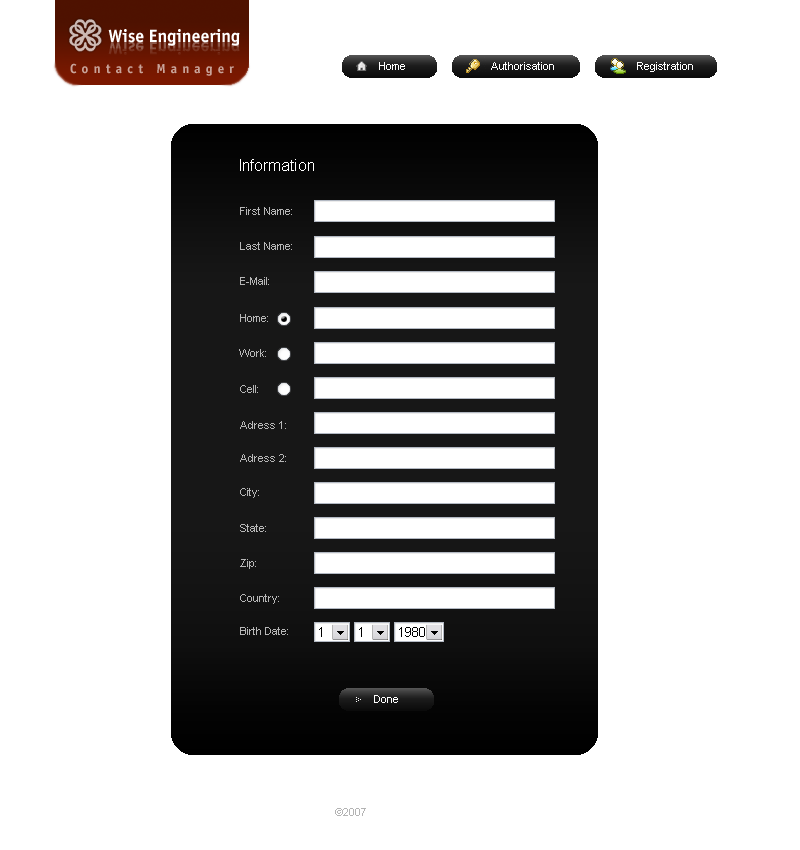
<style>
.page{position:relative;width:800px;height:850px;background:#ffffff}
.page>*{position:absolute;margin:0}
.t1{font:11px "ArialMT";color:#ffffff}
.t2{font:16px "ArialMT";color:#ffffff}
.t3{font:11px "ArialMT";color:#b7b7b7}
.t4{font:11px "ArialMT";color:#b3b3b3}
</style>
<div class="page">
<p class="t1" style="left:379px;top:62px;width:26px;height:8px">Home</p>
<p class="t1" style="left:491px;top:62px;width:63px;height:8px">Authorisation</p>
<p class="t1" style="left:637px;top:62px;width:56px;height:10px">Registration</p>
<p class="t2" style="left:240px;top:159px;width:74px;height:12px">Information</p>
<p class="t3" style="left:240px;top:207px;width:52px;height:8px">First Name:</p>
<p class="t3" style="left:240px;top:242px;width:52px;height:8px">Last Name:</p>
<p class="t3" style="left:240px;top:277px;width:29px;height:8px">E-Mail:</p>
<p class="t3" style="left:240px;top:314px;width:28px;height:8px">Home:</p>
<p class="t3" style="left:239px;top:349px;width:27px;height:8px">Work:</p>
<p class="t3" style="left:240px;top:385px;width:18px;height:8px">Cell:</p>
<p class="t3" style="left:240px;top:421px;width:46px;height:8px">Adress 1:</p>
<p class="t3" style="left:240px;top:454px;width:46px;height:8px">Adress 2:</p>
<p class="t3" style="left:240px;top:488px;width:19px;height:10px">City:</p>
<p class="t3" style="left:240px;top:524px;width:26px;height:8px">State:</p>
<p class="t3" style="left:240px;top:559px;width:16px;height:10px">Zip:</p>
<p class="t3" style="left:240px;top:594px;width:39px;height:10px">Country:</p>
<p class="t3" style="left:240px;top:627px;width:48px;height:8px">Birth Date:</p>
<p class="t1" style="left:374px;top:695px;width:24px;height:8px">Done</p>
<p class="t1" style="left:335px;top:808px;width:117px;height:10px"><span class="t4">©2007</span> Wise Engineering</p>
</div>
